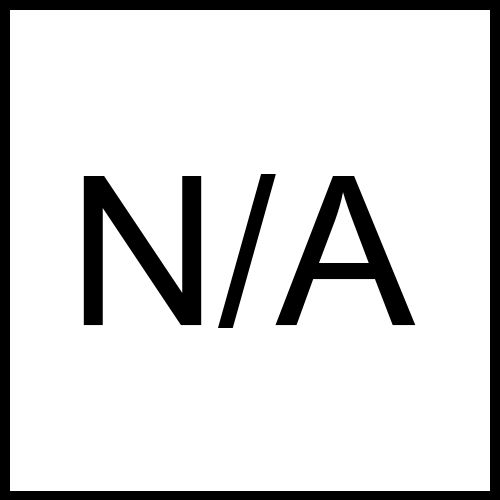
<style>
.page{position:relative;width:500px;height:500px;background:#ffffff}
.page>*{position:absolute;margin:0}
.t1{font:208.3px "ArialMT";color:#000000}
</style>
<div class="page">
<p class="t1" style="left:83px;top:174px;width:333px;height:154px">N/A</p>
</div>
